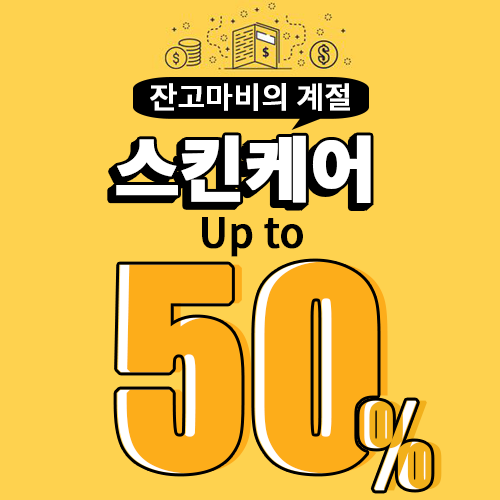
<style>
.page{position:relative;width:500px;height:500px;background:#fed24f}
.page>*{position:absolute;margin:0}
.t1{font:30px "NotoSansKR-Medium";letter-spacing:-0.015em;color:#ffffff;font-weight:bold}
.t2{font:70px "NotoSansKR-Black";letter-spacing:-0.015em;color:#ffffff;font-weight:bold}
.t3{font:40px "NotoSansKR-Medium";letter-spacing:-0.015em;color:#000000;font-weight:bold}
.t4{font:250px "Impact";letter-spacing:-0.015em;color:#fdad1a;font-weight:bold}
.t5{font:105px "Impact";letter-spacing:0.04em;font-weight:bold}
.t6{font:105px "Impact";letter-spacing:0.04em;color:#f2b01b;font-weight:bold}
</style>
<div class="page">
<p class="t1" style="left:150px;top:83px;width:200px;height:28px">잔고마비의 계절</p>
<p class="t2" style="left:116px;top:135px;width:255px;height:68px">스킨케어</p>
<p class="t3" style="left:202px;top:217px;width:101px;height:40px">Up to</p>
<p class="t4" style="left:116px;top:261px;width:262px;height:213px">50</p>
<p class="t4" style="left:117px;top:261px;width:262px;height:213px">50</p>
<p class="t4" style="left:126px;top:261px;width:262px;height:213px">50</p>
<p class="t5" style="left:359px;top:400px;width:73px;height:91px">%</p>
<p class="t5" style="left:360px;top:400px;width:73px;height:91px">%</p>
<p class="t6" style="left:369px;top:400px;width:73px;height:91px">%</p>
</div>
